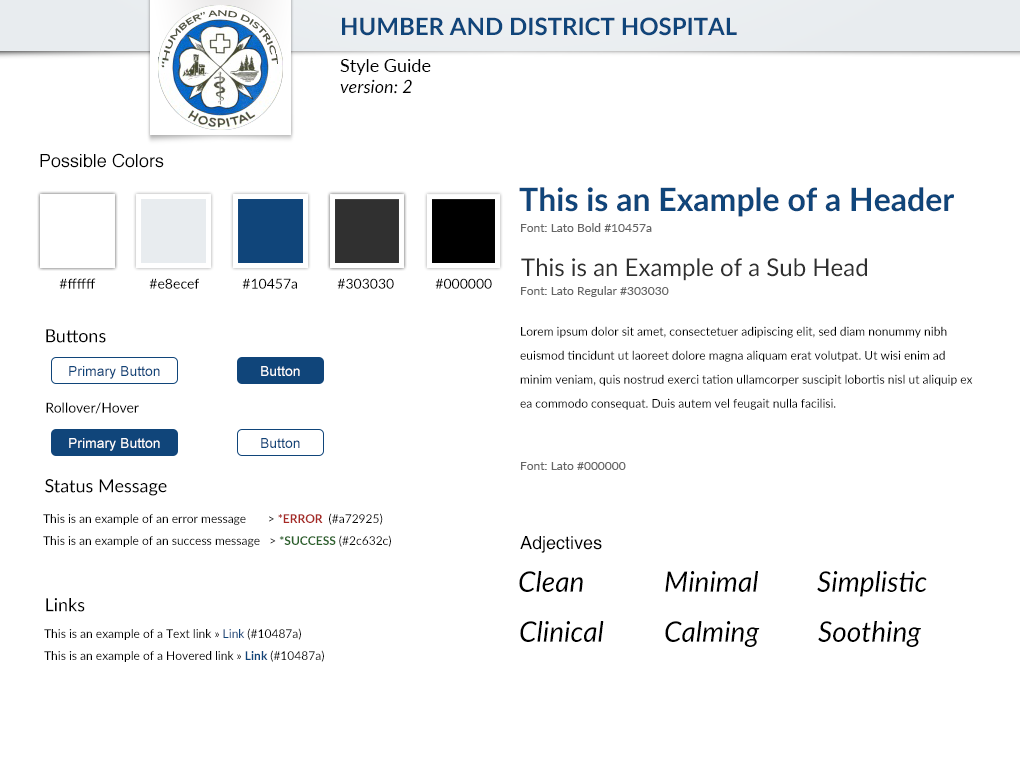
<style>
.page{position:relative;width:1020px;height:760px;background:#ffffff}
.page>*{position:absolute;margin:0}
.t1{font:24px "Lato-Bold";color:#10457a}
.t2{font:18px "Lato-Regular";color:#000000}
.t3{font:18px "Lato-Italic";color:#000000}
.t4{font:18px "Helvetica";color:#000000}
.t5{font:32px "Lato-Bold";color:#10457a}
.t6{font:12px "Lato-Regular";color:#666666}
.t7{font:24px "Lato-Regular";color:#303030}
.t8{font:14px "Lato-Regular";color:#000000}
.t9{font:12px/24px "Lato-Regular";color:#000000}
.t10{font:14px "ArialMT";color:#10457a}
.t11{font:14px "ArialMT";color:#ffffff}
.t12{font:12px "Lato-Regular";color:#000000}
.t13{font:12px "Lato-Bold";color:#a72925}
.t14{font:12px "Lato-Bold";color:#2c632c}
.t15{font:28px "Lato-Italic";color:#000000}
.t16{font:12px "Lato-Regular";color:#10457a}
.t17{font:12px "Lato-Bold";color:#10457a}
</style>
<div class="page">
<p class="t1" style="left:342px;top:17px;width:395px;height:19px">HUMBER AND DISTRICT HOSPITAL</p>
<p class="t2" style="left:340px;top:59px;width:91px;height:16px">Style Guide</p>
<p class="t3" style="left:340px;top:79px;width:72px;height:15px">version: 2</p>
<p class="t4" style="left:40px;top:153px;width:124px;height:15px">Possible Colors</p>
<p class="t5" style="left:519px;top:187px;width:435px;height:30px">This is an Example of a Header</p>
<p class="t6" style="left:521px;top:223px;width:131px;height:9px">Font: Lato Bold #10457a</p>
<p class="t7" style="left:521px;top:258px;width:346px;height:23px">This is an Example of a Sub Head</p>
<p class="t8" style="left:59px;top:278px;width:37px;height:11px">#ffffff</p>
<p class="t8" style="left:149px;top:278px;width:50px;height:11px">#e8ecef</p>
<p class="t8" style="left:242px;top:278px;width:55px;height:11px">#10457a</p>
<p class="t8" style="left:337px;top:278px;width:57px;height:11px">#303030</p>
<p class="t8" style="left:435px;top:278px;width:57px;height:11px">#000000</p>
<p class="t6" style="left:521px;top:286px;width:148px;height:11px">Font: Lato Regular #303030</p>
<p class="t2" style="left:46px;top:329px;width:60px;height:14px">Buttons</p>
<p class="t9" style="left:520px;top:326px;width:453px;height:84px">Lorem ipsum dolor sit amet, consectetuer adipiscing elit, sed diam nonummy nibh euismod tincidunt ut laoreet dolore magna aliquam erat volutpat. Ut wisi enim ad minim veniam, quis nostrud exerci tation ullamcorper suscipit lobortis nisl ut aliquip ex ea commodo consequat. Duis autem vel feugait nulla facilisi.</p>
<p class="t10" style="left:69px;top:366px;width:91px;height:13px">Primary Button</p>
<p class="t11" style="left:261px;top:366px;width:39px;height:10px">Button</p>
<p class="t8" style="left:46px;top:402px;width:93px;height:12px">Rollover/Hover</p>
<p class="t11" style="left:69px;top:438px;width:91px;height:13px">Primary Button</p>
<p class="t10" style="left:261px;top:438px;width:39px;height:10px">Button</p>
<p class="t6" style="left:521px;top:462px;width:105px;height:8px">Font: Lato #000000</p>
<p class="t2" style="left:45px;top:479px;width:122px;height:17px">Status Message</p>
<p class="t12" style="left:43px;top:513px;width:340px;height:12px">This is an example of an error message       &gt; <span class="t13">*ERROR  </span>(#a72925)</p>
<p class="t12" style="left:43px;top:535px;width:348px;height:12px">This is an example of an success message   &gt; <span class="t14">*SUCCESS </span>(#2c632c)</p>
<p class="t4" style="left:520px;top:536px;width:82px;height:17px">Adjectives</p>
<p class="t15" style="left:519px;top:571px;width:64px;height:21px">Clean</p>
<p class="t15" style="left:665px;top:571px;width:93px;height:21px">Minimal</p>
<p class="t15" style="left:817px;top:571px;width:110px;height:26px">Simplistic</p>
<p class="t2" style="left:46px;top:598px;width:39px;height:14px">Links</p>
<p class="t12" style="left:44px;top:628px;width:257px;height:12px">This is an example of a Text link » <span class="t16">Link </span>(#10487a)</p>
<p class="t15" style="left:520px;top:621px;width:84px;height:21px">Clinical</p>
<p class="t15" style="left:665px;top:621px;width:95px;height:26px">Calming</p>
<p class="t15" style="left:818px;top:621px;width:103px;height:26px">Soothing</p>
<p class="t12" style="left:44px;top:650px;width:280px;height:12px">This is an example of a Hovered link » <span class="t17">Link </span>(#10487a)</p>
</div>
